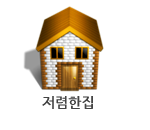
<style>
.page{position:relative;width:150px;height:130px;background:#ffffff}
.page>*{position:absolute;margin:0}
.t1{font:14px "NanumGothicBold";color:#444444}
</style>
<div class="page">
<p class="t1" style="left:42px;top:96px;width:51px;height:13px">저렴한집</p>
</div>
